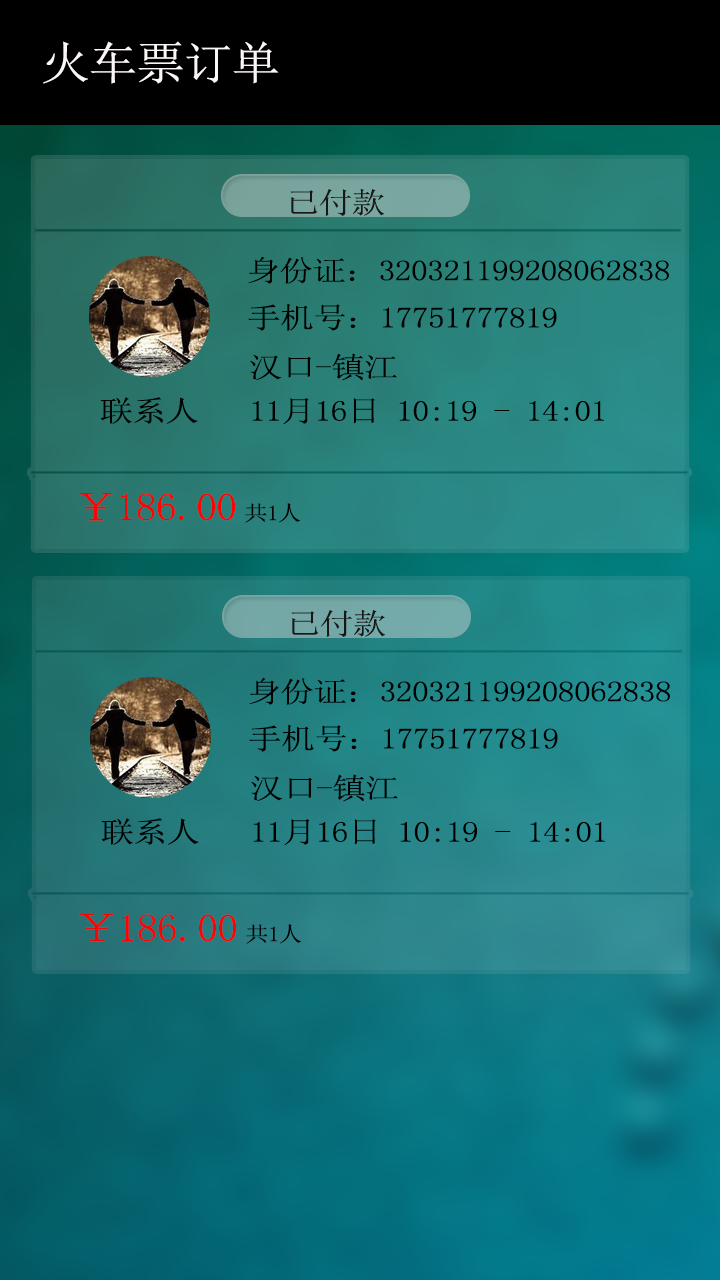
<style>
.page{position:relative;width:720px;height:1280px}
.page>*{position:absolute;margin:0}
.t1{font:45px "NSimSun";letter-spacing:-0.02em;color:#fcf7f7;scale:1.08 1}
.t2{font:29px "NSimSun";letter-spacing:-0.02em;color:#181717;scale:1.16 1}
.t3{font:29px "NSimSun";letter-spacing:-0.02em;color:#000000;scale:1.16 1}
.t4{font:29px "NSimSun";letter-spacing:-0.02em;color:#010101;scale:1.16 1}
.t5{font:38.8px "NSimSun";letter-spacing:-0.02em;color:#fc0202;scale:1.08 1}
.t6{font:21.2px "NSimSun";letter-spacing:-0.02em;color:#030303;scale:1.08 1}
</style>
<div class="page">
<p class="t1" style="left:43px;top:41px;width:236px;height:43px">火车票订单</p>
<p class="t2" style="left:290px;top:188px;width:94px;height:28px">已付款</p>
<p class="t3" style="left:248px;top:256px;width:421px;height:28px">身份证：320321199208062838</p>
<p class="t3" style="left:248px;top:303px;width:309px;height:28px">手机号：17751777819</p>
<p class="t3" style="left:250px;top:353px;width:354px;height:72px">汉口-镇江<br>11月16日 10:19 - 14:01</p>
<p class="t4" style="left:100px;top:397px;width:98px;height:27px">联系人</p>
<p class="t5" style="left:78px;top:493px;width:158px;height:28px">￥186.00</p>
<p class="t6" style="left:245px;top:503px;width:55px;height:20px">共1人</p>
<p class="t2" style="left:291px;top:609px;width:94px;height:28px">已付款</p>
<p class="t3" style="left:249px;top:677px;width:421px;height:28px">身份证：320321199208062838</p>
<p class="t3" style="left:249px;top:724px;width:309px;height:28px">手机号：17751777819</p>
<p class="t3" style="left:251px;top:774px;width:354px;height:72px">汉口-镇江<br>11月16日 10:19 - 14:01</p>
<p class="t4" style="left:101px;top:818px;width:98px;height:27px">联系人</p>
<p class="t5" style="left:79px;top:914px;width:158px;height:28px">￥186.00</p>
<p class="t6" style="left:246px;top:924px;width:55px;height:20px">共1人</p>
</div>
